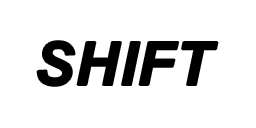
<style>
.page{position:relative;width:256px;height:128px;background:#ffffff}
.page>*{position:absolute;margin:0}
.t1{font:60px "Arial-BoldItalicMT";letter-spacing:0.02em;color:#000000}
</style>
<div class="page">
<p class="t1" style="left:37px;top:41px;width:181px;height:45px">SHIFT</p>
</div>
